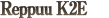
<style>
.page{position:relative;width:109px;height:18px;background:#ffffff}
.page>*{position:absolute;margin:0}
.t1{font:18px "RyuminPro-ExBold";letter-spacing:-0.08em;color:#4a3f32;font-weight:bold;scale:0.9 1}
</style>
<div class="page">
<p class="t1" style="left:0px;top:1px;width:88px;height:18px">Reppuu K2E</p>
</div>
